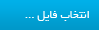
<style>
.page{position:relative;width:99px;height:30px}
.page>*{position:absolute;margin:0}
.t1{font:12px "BYekan";color:#ffffff}
</style>
<div class="page">
<p class="t1" style="left:25px;top:11px;width:64px;height:10px">انتخاب فایل ...</p>
</div>
